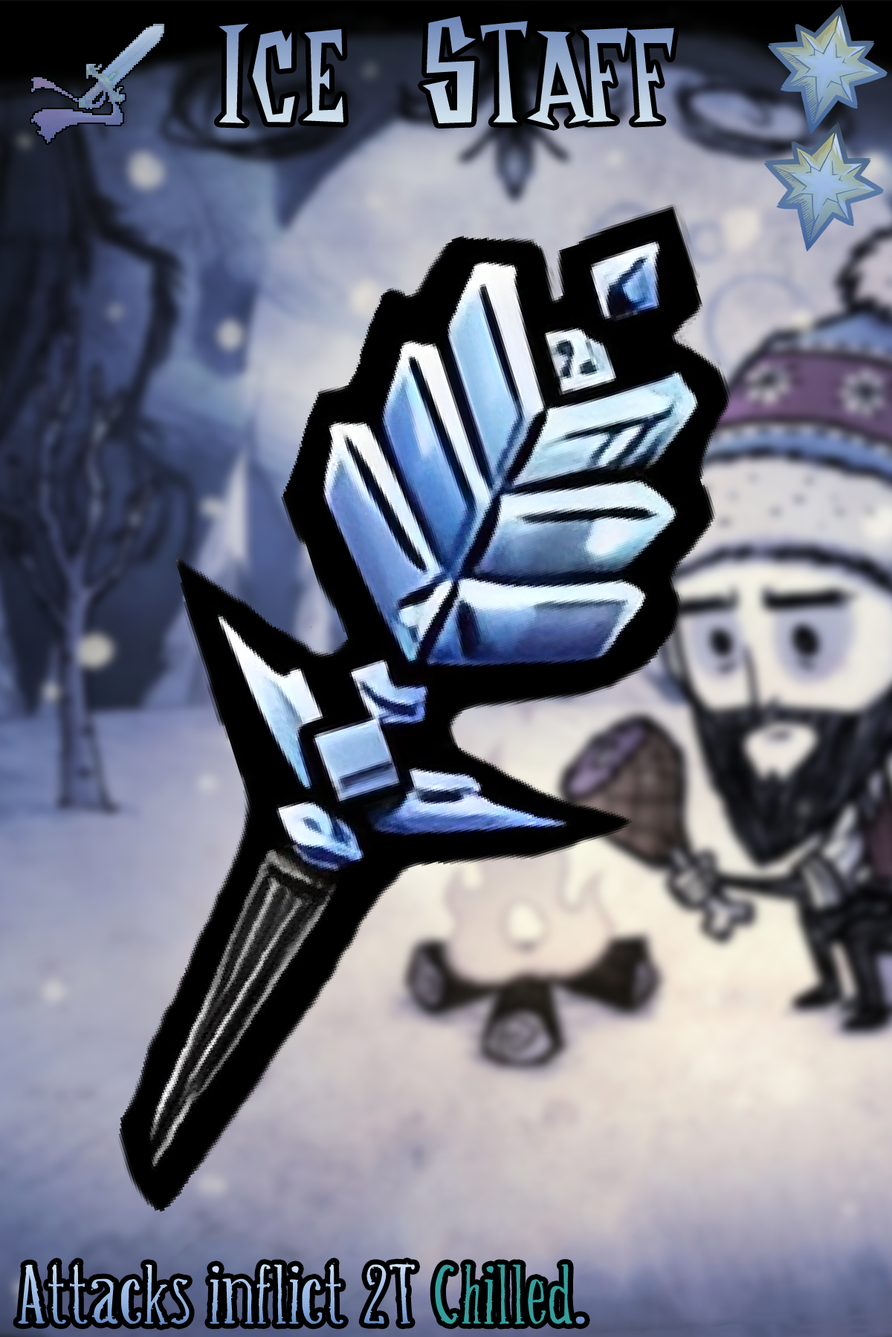
<style>
.page{position:relative;width:892px;height:1337px}
.page>*{position:absolute;margin:0}
.t1{font:250.4px "DontStarveNameFont"}
.t2{font:111.2px "Belisaplumillamanual";scale:1.47 1}
.t3{font:111.2px "Belisaplumillamanual";color:#359e9d;scale:1.47 1}
</style>
<div class="page">
<p class="t1" style="left:218px;top:16px;width:456px;height:110px">ICE Staff</p>
<p class="t2" style="left:18px;top:1263px;width:567px;height:63px">Attacks inflict 2T Chilled.</p>
<p class="t3" style="left:435px;top:1265px;width:137px;height:60px">Chilled</p>
</div>
